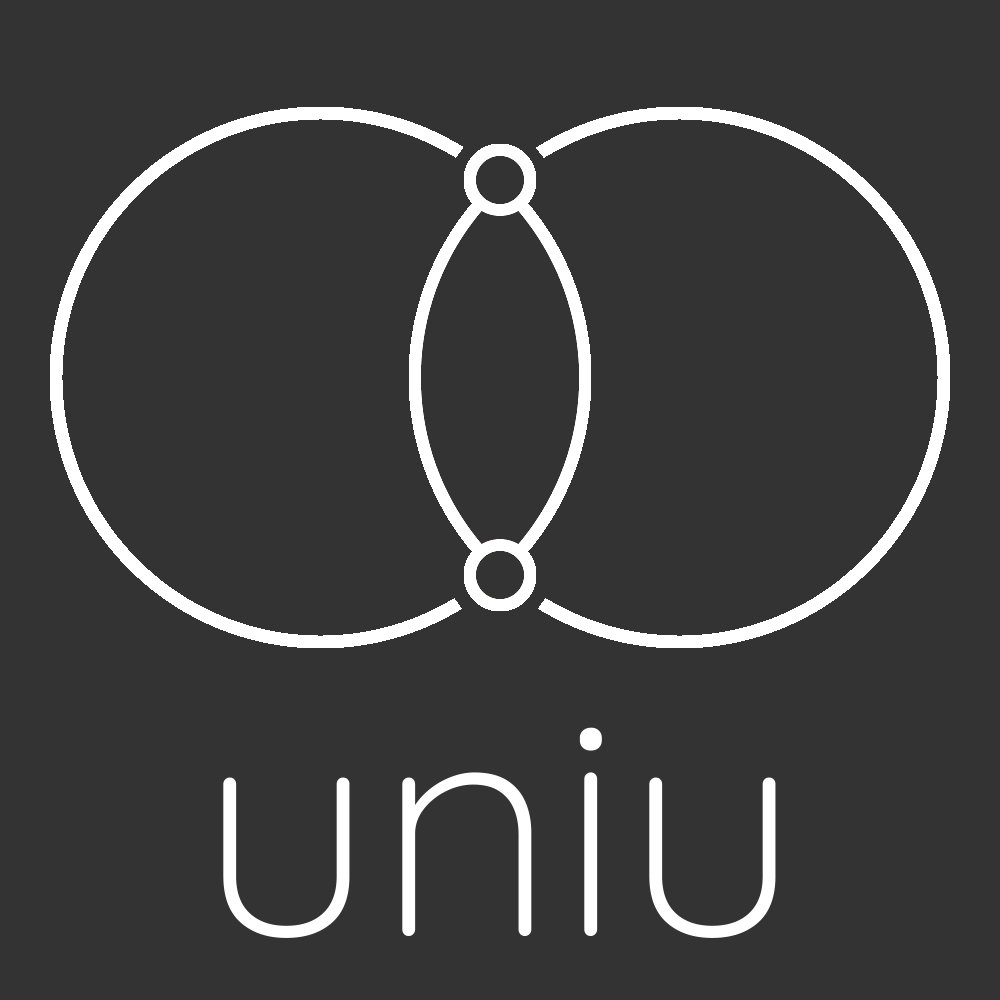
<style>
.page{position:relative;width:1000px;height:1000px;background:#333333}
.page>*{position:absolute;margin:0}
.t1{font:317.6px "Quicksand-Light";color:#ffffff}
</style>
<div class="page">
<p class="t1" style="left:223px;top:727px;width:553px;height:211px">uniu</p>
</div>
